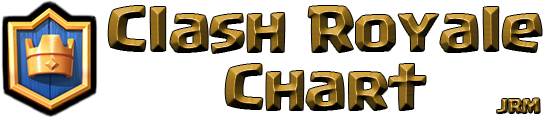
<style>
.page{position:relative;width:549px;height:121px;background:#ffffff}
.page>*{position:absolute;margin:0}
.t1{font:48.5px "Supercell-Magic"}
.t2{font:14.5px "Supercell-Magic"}
</style>
<div class="page">
<p class="t1" style="left:108px;top:6px;width:434px;height:104px;text-align:center">Clash Royale<br>Chart</p>
<p class="t2" style="left:497px;top:98px;width:43px;height:15px">JRM</p>
</div>
